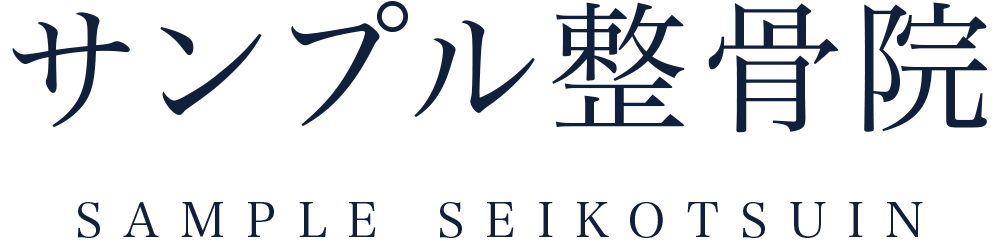
<style>
.page{position:relative;width:1000px;height:240px;background:#ffffff}
.page>*{position:absolute;margin:0}
.t1{font:140.8px "HiraMinPro-W3";letter-spacing:0.075em;color:#101f3a}
.t2{font:48.6px "HiraMinPro-W3";letter-spacing:0.435em;color:#101f3a}
</style>
<div class="page">
<p class="t1" style="left:12px;top:1px;width:975px;height:132px">サンプル整骨院</p>
<p class="t2" style="left:78px;top:202px;width:845px;height:36px">SAMPLE SEIKOTSUIN</p>
</div>
